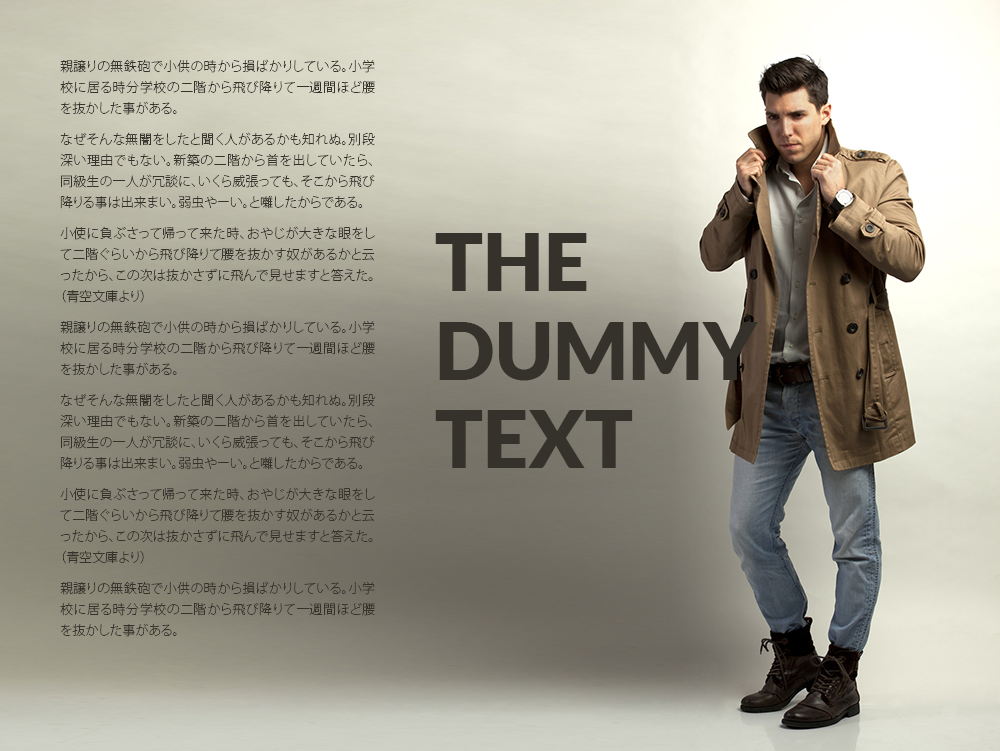
<style>
.page{position:relative;width:1000px;height:751px}
.page>*{position:absolute;margin:0}
.t1{font:13px/21px "KozGoPr6N-ExtraLight";color:#34322b}
.t2{font:80px/20.4px "Lato-Black";color:#34322b}
</style>
<div class="page">
<p class="t1" style="left:60px;top:59px;width:315px;height:578px;text-align:justify">親譲りの無鉄砲で小供の時から損ばかりしている。小学校に居る時分学校の二階から飛び降りて一週間ほど腰を抜かした事がある。<br>なぜそんな無闇をしたと聞く人があるかも知れぬ。別段深い理由でもない。新築の二階から首を出していたら、同級生の一人が冗談に、いくら威張っても、そこから飛び降りる事は出来まい。弱虫やーい。と囃したからである。<br>小使に負ぶさって帰って来た時、おやじが大きな眼をして二階ぐらいから飛び降りて腰を抜かす奴があるかと云ったから、この次は抜かさずに飛んで見せますと答えた。（青空文庫より）<br>親譲りの無鉄砲で小供の時から損ばかりしている。小学校に居る時分学校の二階から飛び降りて一週間ほど腰を抜かした事がある。<br>なぜそんな無闇をしたと聞く人があるかも知れぬ。別段深い理由でもない。新築の二階から首を出していたら、同級生の一人が冗談に、いくら威張っても、そこから飛び降りる事は出来まい。弱虫やーい。と囃したからである。<br>小使に負ぶさって帰って来た時、おやじが大きな眼をして二階ぐらいから飛び降りて腰を抜かす奴があるかと云ったから、この次は抜かさずに飛んで見せますと答えた。（青空文庫より）<br>親譲りの無鉄砲で小供の時から損ばかりしている。小学校に居る時分学校の二階から飛び降りて一週間ほど腰を抜かした事がある。</p>
<p class="t2" style="left:435px;top:233px;width:323px;height:235px;text-align:justify">THE<br>DUMMY<br>TEXT</p>
</div>
